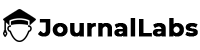
<style>
.page{position:relative;width:200px;height:50px;background:#ffffff}
.page>*{position:absolute;margin:0}
.t1{font:24px "Montserrat-Bold";color:#000000;font-weight:bold}
</style>
<div class="page">
<p class="t1" style="left:38px;top:18px;width:160px;height:19px">JournalLabs</p>
</div>
